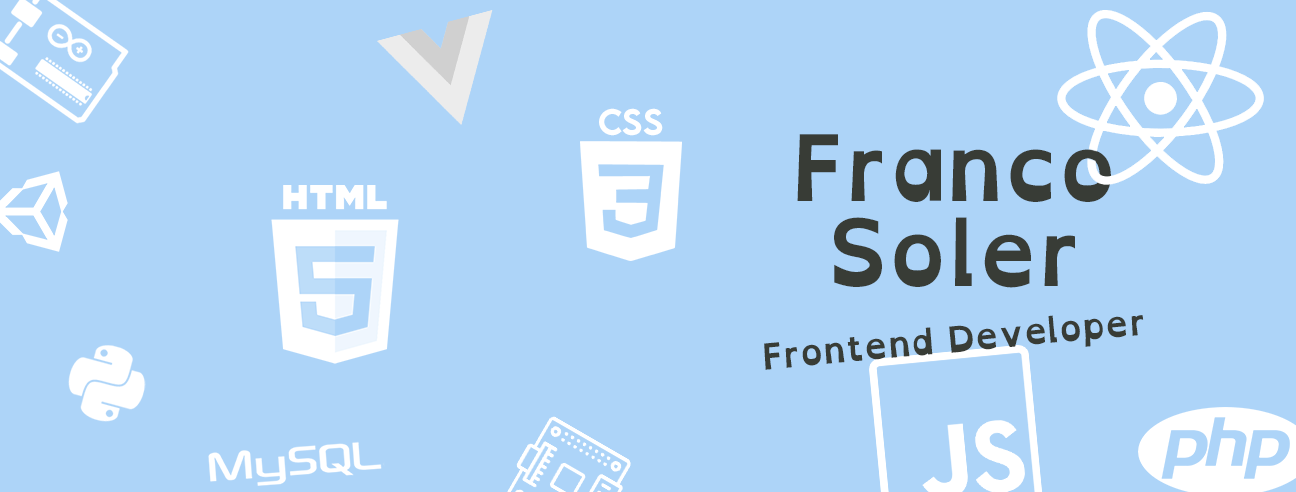
<style>
.page{position:relative;width:1296px;height:492px;background:#add4f8}
.page>*{position:absolute;margin:0}
.t1{font:33px "LEMONMILK-Medium";color:#ffffff}
.t2{font:91.8px/85px "OpenDyslexicAlta-Bold";color:#383c36}
.t3{font:36px "OpenDyslexicAlta-Bold";color:#383c36}
</style>
<div class="page">
<p class="t1" style="left:599px;top:108px;width:64px;height:28px">CSS</p>
<p class="t2" style="left:797px;top:134px;width:314px;height:154px;text-align:center">Franco<br>Soler</p>
<p class="t3" style="left:764px;top:315px;width:380px;height:55px;rotate:-5deg">Frontend Developer</p>
</div>
